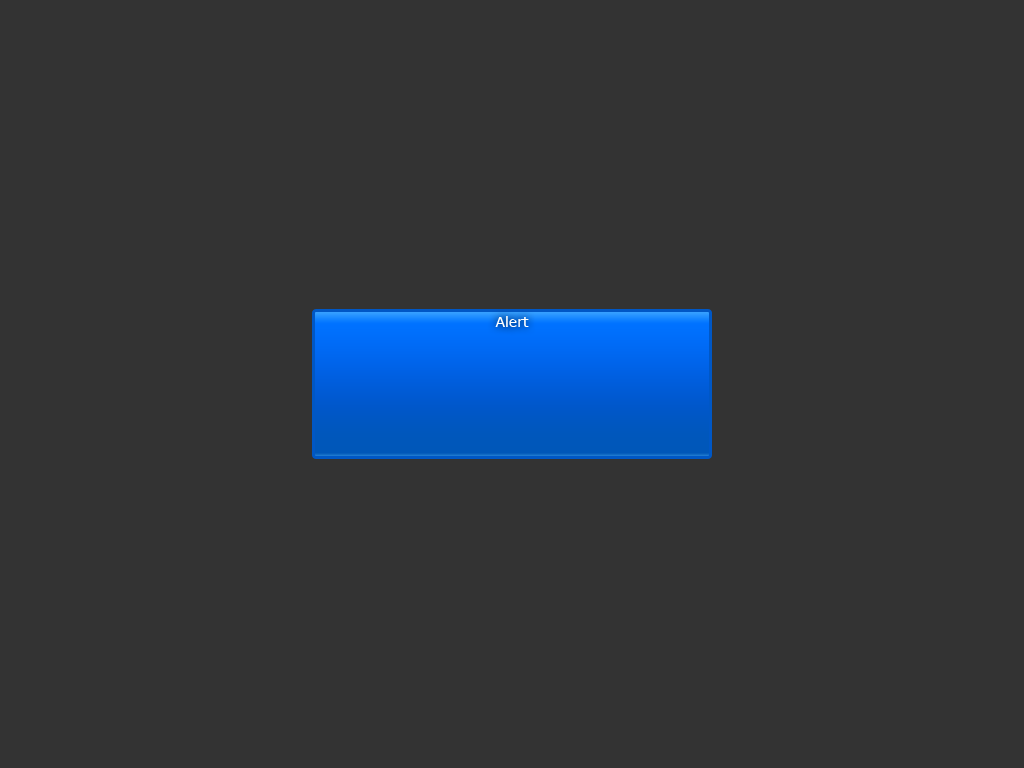
<style>
.page{position:relative;width:1024px;height:768px;background:#333333}
.page>*{position:absolute;margin:0}
.t1{font:14px "Verdana";color:#ffffff}
</style>
<div class="page">
<p class="t1" style="left:495px;top:316px;width:34px;height:11px">Alert</p>
</div>
